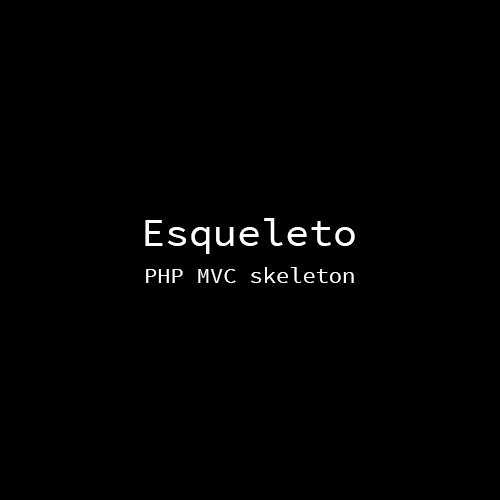
<style>
.page{position:relative;width:500px;height:500px;background:#000000}
.page>*{position:absolute;margin:0}
.t1{font:40px "SourceCodePro-Regular";color:#ffffff}
.t2{font:22px "SourceCodePro-Regular";color:#ffffff}
</style>
<div class="page">
<p class="t1" style="left:145px;top:218px;width:210px;height:36px">Esqueleto</p>
<p class="t2" style="left:146px;top:267px;width:208px;height:16px">PHP MVC skeleton</p>
</div>
